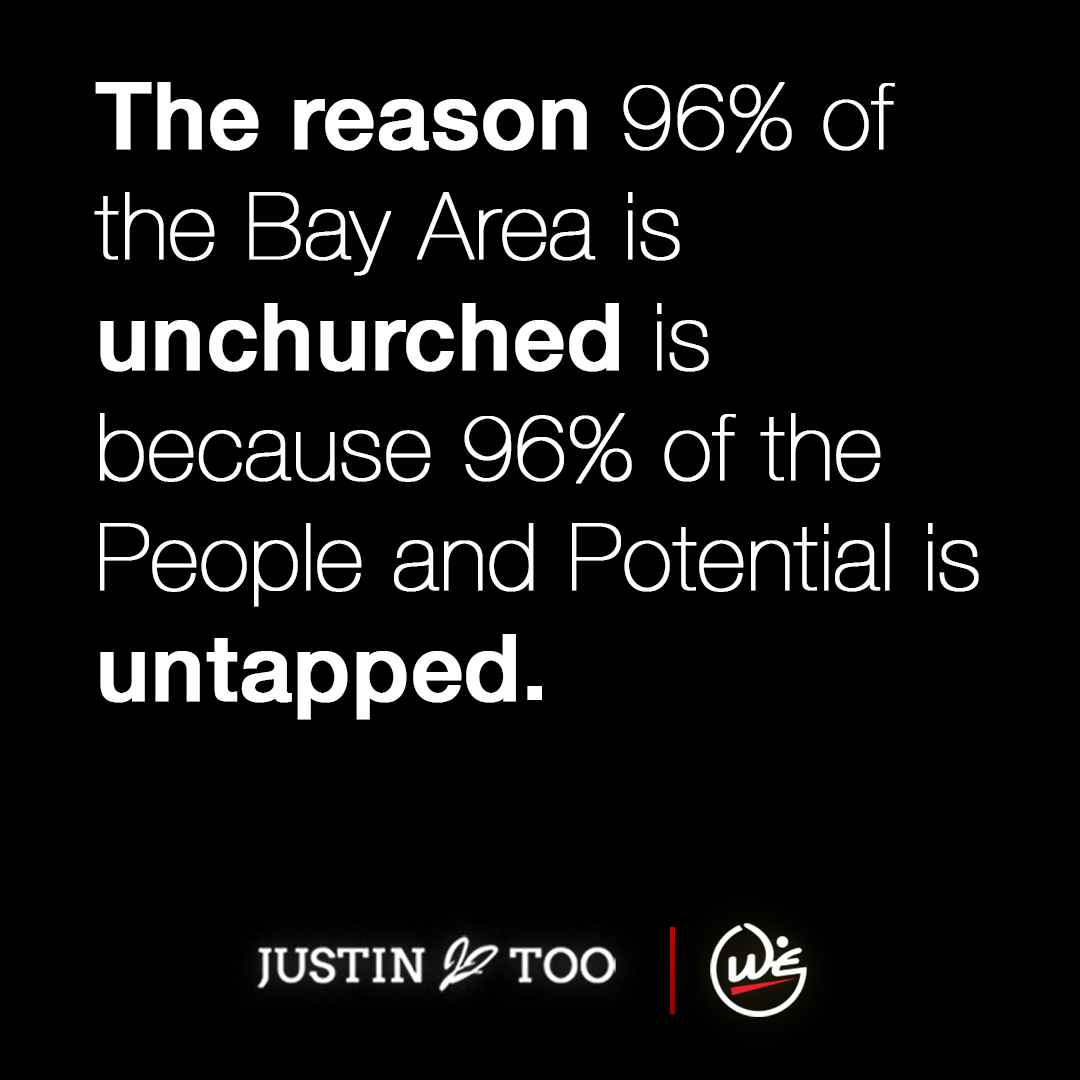
<style>
.page{position:relative;width:1080px;height:1080px;background:#000000}
.page>*{position:absolute;margin:0}
.t1{font:92px "HelveticaNeue-UltraLight";color:#ffffff;font-weight:bold}
.t2{font:92px "HelveticaNeue-Medium";color:#ffffff;font-weight:bold}
.t3{font:92px "HelveticaNeue-Bold";color:#ffffff}
</style>
<div class="page">
<p class="t1" style="left:94px;top:82px;width:885px;height:638px"><span class="t2">The reason</span> 96% of the Bay Area is <span class="t2">unchurched </span>is because 96% of the People and Potential is <span class="t2">untapped</span><span class="t3">.</span></p>
</div>
